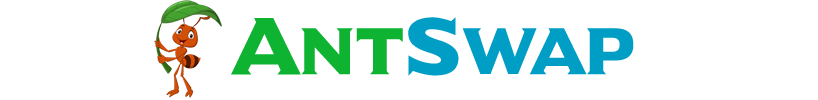
<style>
.page{position:relative;width:818px;height:100px;background:#ffffff}
.page>*{position:absolute;margin:0}
.t1{font:65px "UniversalSerif";color:#009ec5}
.t2{font:80px "UniversalSerif";color:#0eb331}
.t3{font:65px "UniversalSerif";color:#0eb331}
.t4{font:80px "UniversalSerif";color:#009ec5}
</style>
<div class="page">
<p class="t1" style="left:231px;top:17px;width:403px;height:59px"><span class="t2">A</span><span class="t3">NT</span><span class="t4">S</span>WAP</p>
</div>
